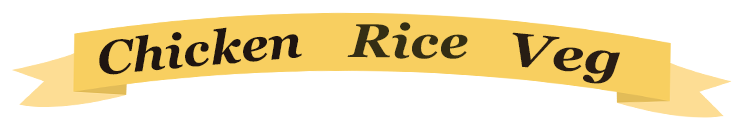
<style>
.page{position:relative;width:742px;height:132px;background:#ffffff}
.page>*{position:absolute;margin:0}
.t1{font:47.4px "Georgia-BoldItalic";color:#1f1511;scale:1.04 1}
.t2{font:47.4px "Georgia-BoldItalic";color:#342e14;scale:1.11 1}
.t3{font:47.4px "Georgia-BoldItalic";color:#281d14;scale:1.22 1}
.t4{font:47.4px "MyriadPro-Regular";color:#c69c6d;scale:1.22 1}
</style>
<div class="page">
<p class="t1" style="left:99px;top:27px;width:203px;height:48px;rotate:-5deg">Chicken</p>
<p class="t2" style="left:347px;top:22px;width:121px;height:37px">Rice</p>
<p class="t3" style="left:512px;top:32px;width:108px;height:52px;rotate:6deg"><span class="t4"> </span>Veg</p>
</div>
